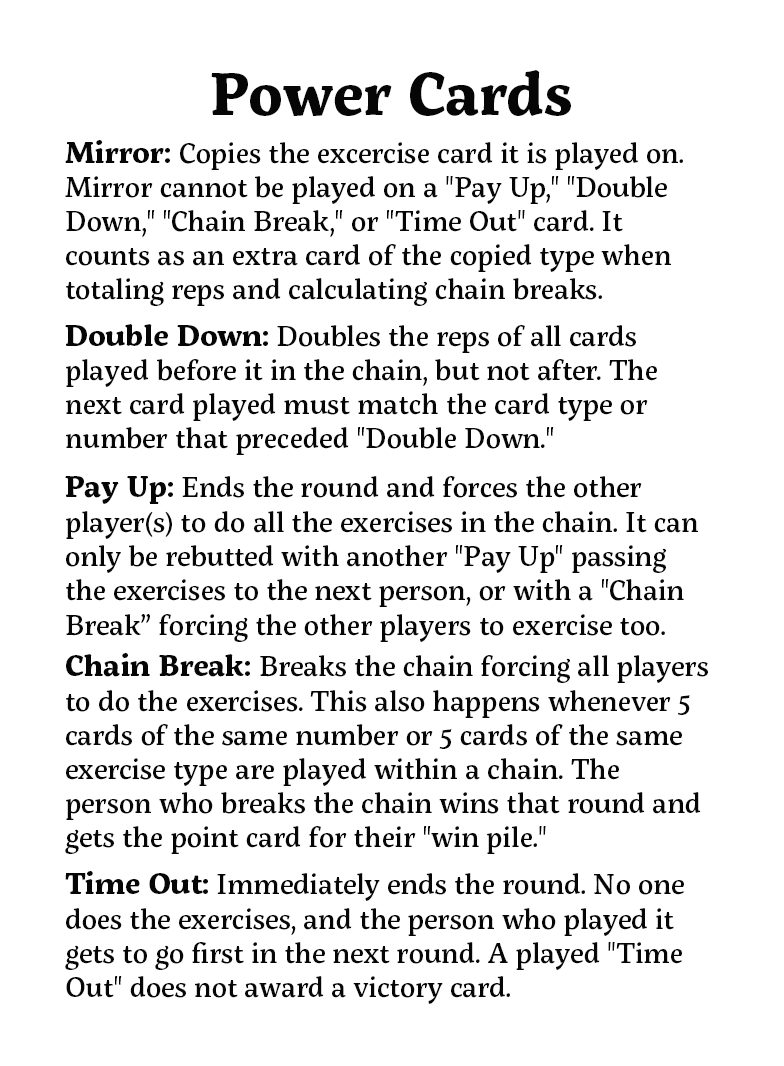
<style>
.page{position:relative;width:784px;height:1066px;background:#ffffff}
.page>*{position:absolute;margin:0}
.t1{font:60px "ServusSlab-Bold";color:#060606}
.t2{font:28.5px "ServusSlab-Medium";color:#060606}
.t3{font:30px "ServusSlab-Bold";color:#060606}
.t4{font:29px "ServusSlab-Medium";color:#060606}
</style>
<div class="page">
<p class="t1" style="left:211px;top:70px;width:360px;height:46px">Power Cards</p>
<p class="t2" style="left:65px;top:140px;width:618px;height:166px"><span class="t3">Mirror: </span>Copies the excercise card it is played on. Mirror cannot be played on a "Pay Up," "Double Down," "Chain Break," or "Time Out" card. It counts as an extra card of the copied type when totaling reps and calculating chain breaks.</p>
<p class="t2" style="left:65px;top:324px;width:592px;height:131px"><span class="t3">Double Down: </span>Doubles the reps of all cards played before it in the chain, but not after. The next card played must match the card type or number that preceded "Double Down."</p>
<p class="t2" style="left:65px;top:476px;width:633px;height:166px"><span class="t3">Pay Up: </span>Ends the round and forces the other player(s) to do all the exercises in the chain. It can only be rebutted with another "Pay Up" passing the exercises to the next person, or with a "Chain Break” forcing the other players to exercise too<span class="t4">.</span></p>
<p class="t2" style="left:65px;top:653px;width:643px;height:201px"><span class="t3">Chain Break: </span>Breaks the chain forcing all players to do the exercises. This also happens whenever 5 cards of the same number or 5 cards of the same exercise type are played within a chain. The person who breaks the chain wins that round and gets the point card for their "win pile."</p>
<p class="t2" style="left:65px;top:871px;width:619px;height:133px"><span class="t3">Time Out: </span>Immediately ends the round. No one does the exercises, and the person who played it gets to go first in the next round. A played "Time Out" does not award a victory card.</p>
</div>
